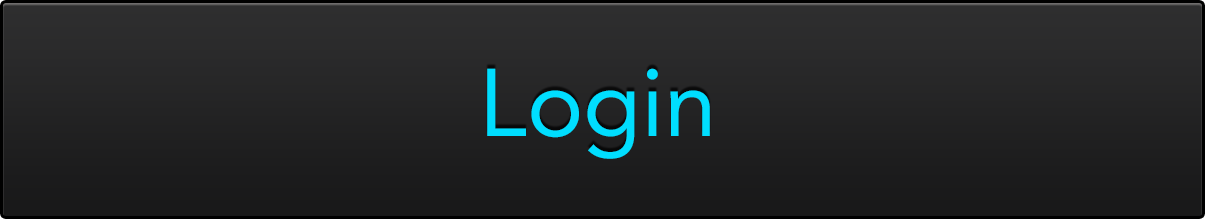
<style>
.page{position:relative;width:1205px;height:219px}
.page>*{position:absolute;margin:0}
.t1{font:95px "Avenir-Roman";color:#00deff}
</style>
<div class="page">
<p class="t1" style="left:487px;top:68px;width:223px;height:91px">Login</p>
</div>
